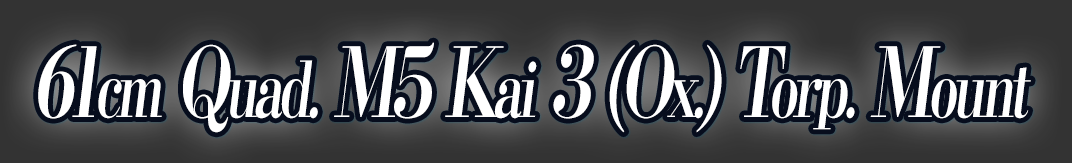
<style>
.page{position:relative;width:1072px;height:163px}
.page>*{position:absolute;margin:0}
.t1{font:76.8px "KochoStd-Heavy";letter-spacing:-0.08em;color:#ffffff;font-style:italic;scale:0.7 1}
.t2{font:96px "KochoStd-Heavy";letter-spacing:-0.08em;color:#ffffff;font-style:italic;scale:0.7 1}
</style>
<div class="page">
<p class="t1" style="left:38px;top:42px;width:993px;height:91px"><span class="t2">61</span>cm<span class="t2"> Q</span>uad.<span class="t2"> M5 K</span>ai<span class="t2"> 3 (O</span>x.<span class="t2">) T</span>orp.<span class="t2"> M</span>ount</p>
</div>
